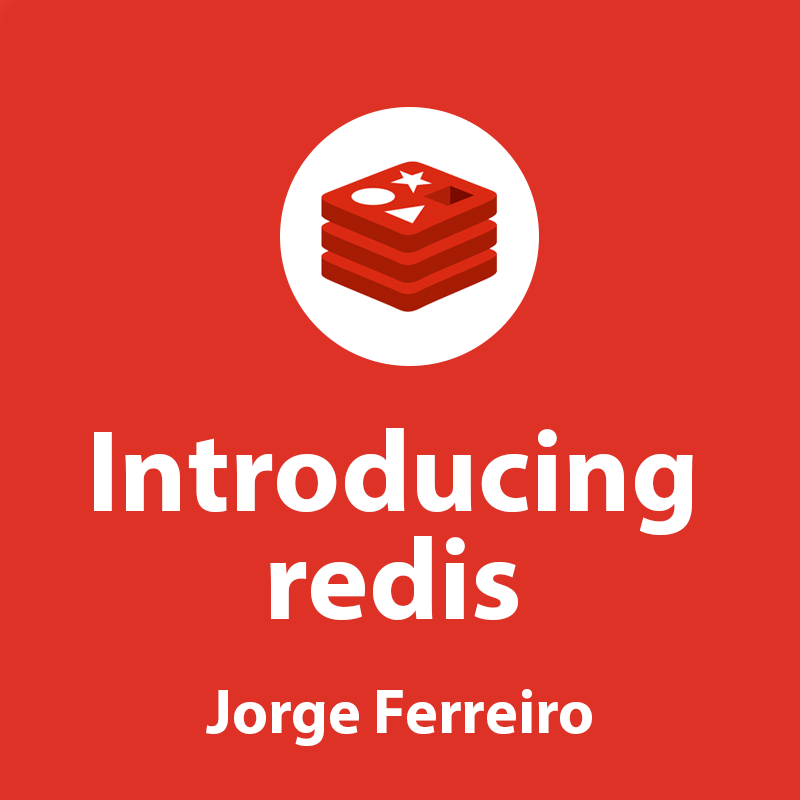
<style>
.page{position:relative;width:800px;height:800px;background:#de3226}
.page>*{position:absolute;margin:0}
.t1{font:116.7px/108.3px "MyriadPro-Bold";color:#ffffff}
.t2{font:62.5px "MyriadPro-Bold";color:#ffffff}
</style>
<div class="page">
<p class="t1" style="left:94px;top:428px;width:599px;height:192px;text-align:center">Introducing<br>redis</p>
<p class="t2" style="left:206px;top:689px;width:386px;height:57px">Jorge Ferreiro</p>
</div>
